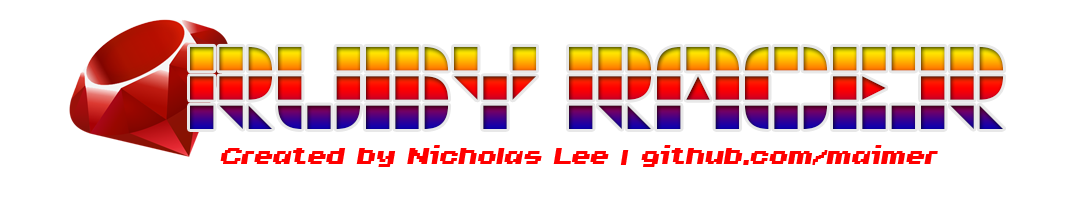
<style>
.page{position:relative;width:1088px;height:200px;background:#ffffff}
.page>*{position:absolute;margin:0}
.t1{font:120px "GeoGrid9"}
.t2{font:28px "Invasion2000";color:#ff0000}
</style>
<div class="page">
<p class="t1" style="left:190px;top:46px;width:347px;height:83px">RUBY</p>
<p class="t1" style="left:569px;top:46px;width:435px;height:83px">RACER</p>
<p class="t2" style="left:220px;top:145px;width:718px;height:22px">Created by Nicholas Lee | github.com/maimer</p>
</div>
